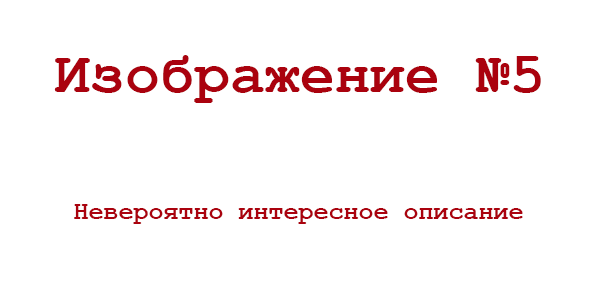
<style>
.page{position:relative;width:600px;height:300px;background:#ffffff}
.page>*{position:absolute;margin:0}
.t1{font:58.3px "CourierNewPS-BoldMT";color:#aa020e}
.t2{font:25px "CourierNewPS-BoldMT";color:#aa020e}
</style>
<div class="page">
<p class="t1" style="left:54px;top:55px;width:487px;height:48px">Изображение №5</p>
<p class="t2" style="left:74px;top:204px;width:449px;height:20px">Невероятно интересное описание</p>
</div>
